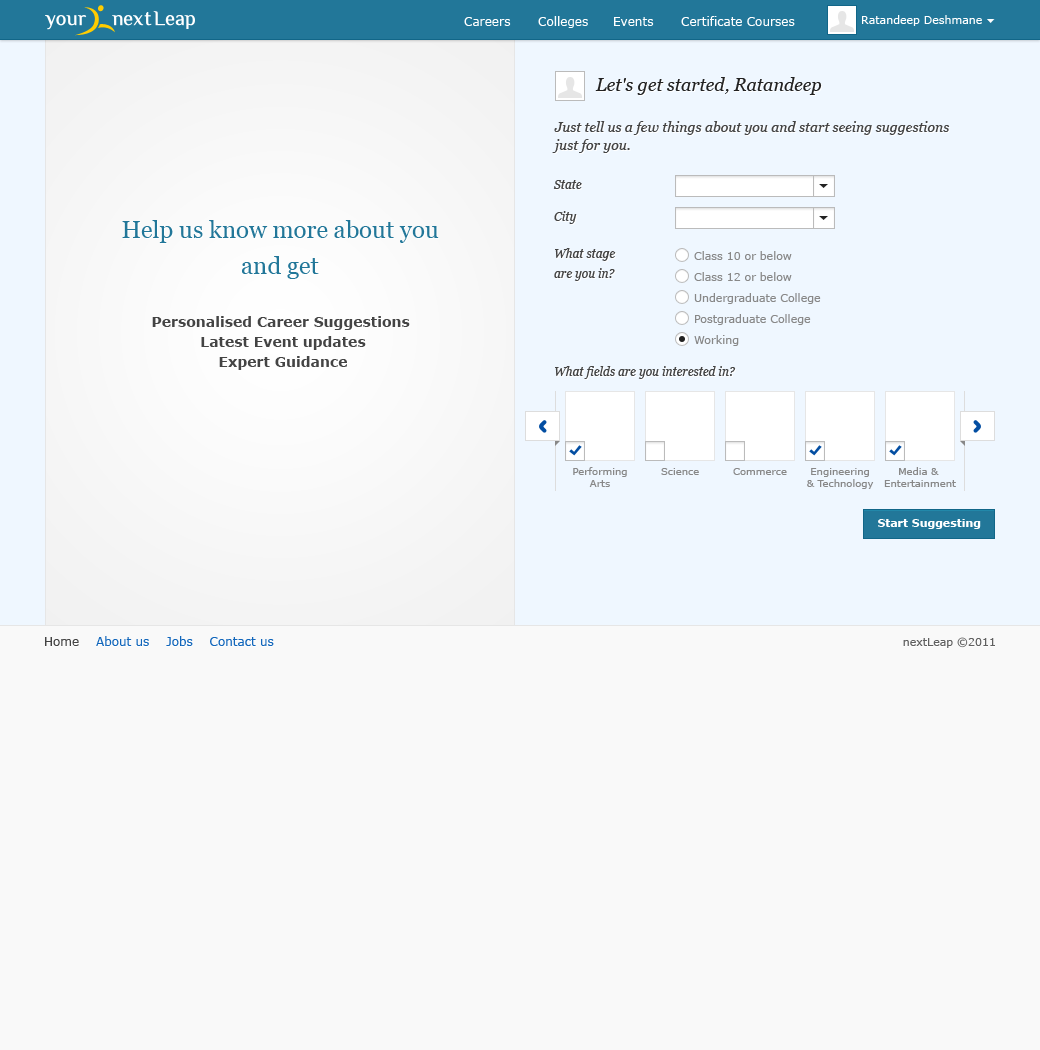
<style>
.page{position:relative;width:1040px;height:1050px;background:#f9f9f9}
.page>*{position:absolute;margin:0}
.t1{font:12px "Verdana";color:#ffffff}
.t2{font:11px "Verdana";color:#ffffff}
.t3{font:12px "Webdings";color:#ffffff}
.t4{font:18px "Georgia-Italic";color:#222222}
.t5{font:14px/18px "Georgia-Italic";color:#444444}
.t6{font:12px "Georgia-Italic";color:#444444}
.t7{font:24px/36px "Georgia";color:#227799}
.t8{font:12px/20px "Georgia-Italic";color:#444444}
.t9{font:11px "Verdana";color:#888888}
.t10{font:14px/20px "Verdana-Bold";color:#444444}
.t11{font:10px/12px "Verdana";color:#888888}
.t12{font:10px "Verdana";color:#888888}
.t13{font:11px "Verdana-Bold";color:#ffffff}
.t14{font:12px "Verdana";color:#1166bb}
.t15{font:12px "Verdana";color:#444444}
.t16{font:11px "Verdana";color:#606060}
</style>
<div class="page">
<p class="t1" style="left:464px;top:17px;width:47px;height:9px">Careers</p>
<p class="t1" style="left:538px;top:16px;width:50px;height:12px">Colleges</p>
<p class="t1" style="left:614px;top:17px;width:40px;height:9px">Events</p>
<p class="t1" style="left:681px;top:16px;width:114px;height:10px">Certificate Courses</p>
<p class="t2" style="left:862px;top:15px;width:133px;height:11px">Ratandeep Deshmane <span class="t3">6</span></p>
<p class="t4" style="left:595px;top:77px;width:227px;height:18px">Let's get started, Ratandeep</p>
<p class="t5" style="left:552px;top:121px;width:398px;height:32px">Just tell us a few things about you and start seeing suggestions <br>just for you.</p>
<p class="t6" style="left:553px;top:180px;width:29px;height:9px">State</p>
<p class="t7" style="left:122px;top:220px;width:317px;height:59px;text-align:center">Help us know more about you<br>and get</p>
<p class="t6" style="left:554px;top:211px;width:23px;height:13px">City</p>
<p class="t8" style="left:554px;top:248px;width:62px;height:33px">What stage <br>are you in?</p>
<p class="t9" style="left:694px;top:251px;width:98px;height:9px">Class 10 or below</p>
<p class="t9" style="left:694px;top:272px;width:98px;height:9px">Class 12 or below</p>
<p class="t9" style="left:694px;top:293px;width:127px;height:11px">Undergraduate College</p>
<p class="t10" style="left:152px;top:316px;width:258px;height:54px;text-align:center">Personalised Career Suggestions <br>Latest Event updates<br>Expert Guidance</p>
<p class="t9" style="left:695px;top:314px;width:116px;height:11px">Postgraduate College</p>
<p class="t9" style="left:694px;top:335px;width:45px;height:11px">Working</p>
<p class="t6" style="left:555px;top:366px;width:181px;height:13px">What fields are you interested in?</p>
<p class="t11" style="left:573px;top:467px;width:54px;height:20px;text-align:center">Performing<br>Arts</p>
<p class="t12" style="left:661px;top:468px;width:38px;height:7px">Science</p>
<p class="t12" style="left:733px;top:468px;width:54px;height:7px">Commerce</p>
<p class="t11" style="left:807px;top:468px;width:67px;height:21px;text-align:center">Engineering<br>&amp; Technology</p>
<p class="t11" style="left:884px;top:467px;width:72px;height:20px;text-align:center">Media &amp; <br>Entertainment</p>
<p class="t13" style="left:878px;top:519px;width:103px;height:10px">Start Suggesting</p>
<p class="t14" style="left:45px;top:636px;width:229px;height:10px"><span class="t15">Home</span>    About us    Jobs    Contact us</p>
<p class="t16" style="left:903px;top:637px;width:92px;height:11px">nextLeap ©2011</p>
</div>
